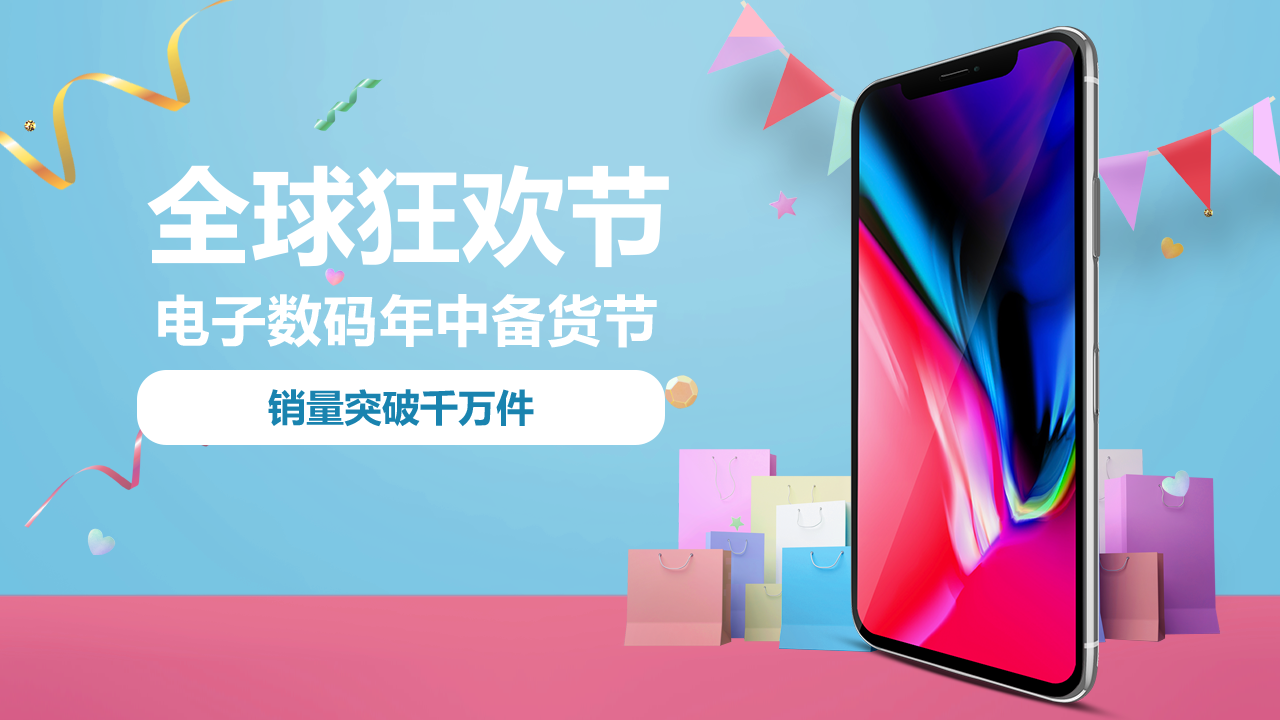
<style>
.page{position:relative;width:1280px;height:720px}
.page>*{position:absolute;margin:0}
.t1{font:105px "MicrosoftYaHei-Bold";color:#ffffff;text-transform:uppercase}
.t2{font:55px "MicrosoftYaHei-Bold";letter-spacing:0.02em;color:#ffffff;text-transform:uppercase}
.t3{font:38px "MicrosoftYaHei-Bold";color:#1983af;text-transform:uppercase}
</style>
<div class="page">
<p class="t1" style="left:147px;top:165px;width:522px;height:103px">全球狂欢节</p>
<p class="t2" style="left:158px;top:294px;width:499px;height:54px">电子数码年中备货节</p>
<p class="t3" style="left:268px;top:389px;width:266px;height:38px">销量突破千万件</p>
</div>
